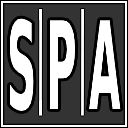
<style>
.page{position:relative;width:128px;height:128px;background:#333333}
.page>*{position:absolute;margin:0}
.t1{font:121.5px "DejaVuSans-Bold";color:#ffffff;scale:0.33 1}
</style>
<div class="page">
<p class="t1" style="left:9px;top:18px;width:112px;height:93px">S  P   A</p>
</div>
